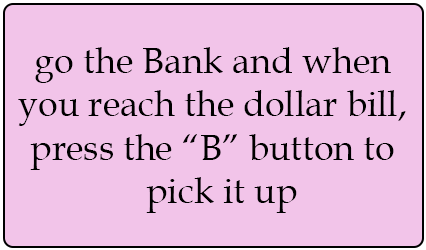
<style>
.page{position:relative;width:426px;height:250px;background:#f2c4e9}
.page>*{position:absolute;margin:0}
.t1{font:36px "BookAntiqua";color:#000000}
</style>
<div class="page">
<p class="t1" style="left:18px;top:47px;width:388px;height:166px;text-align:center">go the Bank and when you reach the dollar bill, press the “B” button to pick it up</p>
</div>
